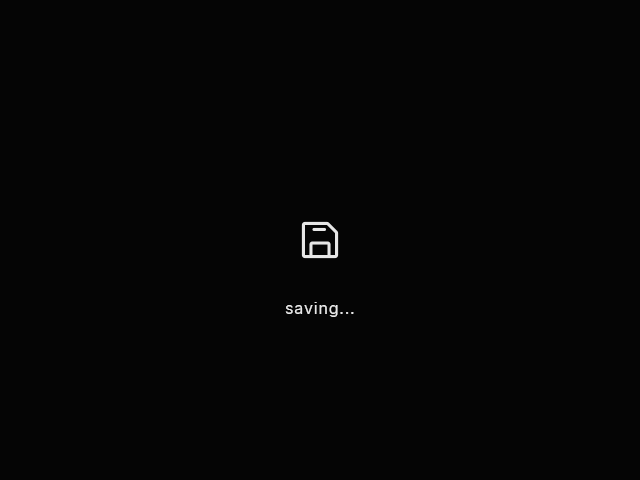
<style>
.page{position:relative;width:640px;height:480px;background:#050505}
.page>*{position:absolute;margin:0}
.t1{font:16px "Inter-Regular";letter-spacing:0.05em;color:#e7e7e7}
</style>
<div class="page">
<p class="t1" style="left:285px;top:302px;width:69px;height:15px">saving...</p>
</div>
